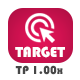
<style>
.page{position:relative;width:80px;height:80px;background:#ffffff}
.page>*{position:absolute;margin:0}
.t1{font:15px "Bauhaus93";color:#ffffff}
.t2{font:12px "Bauhaus93";color:#464646}
</style>
<div class="page">
<p class="t1" style="left:15px;top:46px;width:50px;height:12px">TARGET</p>
<p class="t2" style="left:15px;top:65px;width:48px;height:10px">TP 1.00x</p>
</div>
